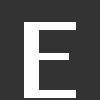
<style>
.page{position:relative;width:100px;height:100px;background:#333333}
.page>*{position:absolute;margin:0}
.t1{font:96.7px "System";color:#ffffff}
</style>
<div class="page">
<p class="t1" style="left:24px;top:22px;width:52px;height:76px">E</p>
</div>
